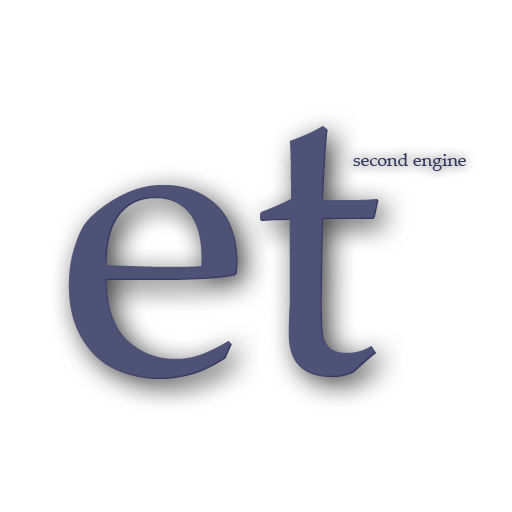
<style>
.page{position:relative;width:512px;height:512px;background:#ffffff}
.page>*{position:absolute;margin:0}
.t1{font:400px "PalatinoLinotype-Roman";color:#4e5276}
.t2{font:18px "PalatinoLinotype-Roman";color:#323660}
</style>
<div class="page">
<p class="t1" style="left:68px;top:125px;width:311px;height:254px">et</p>
<p class="t2" style="left:353px;top:153px;width:113px;height:18px">second engine</p>
</div>
